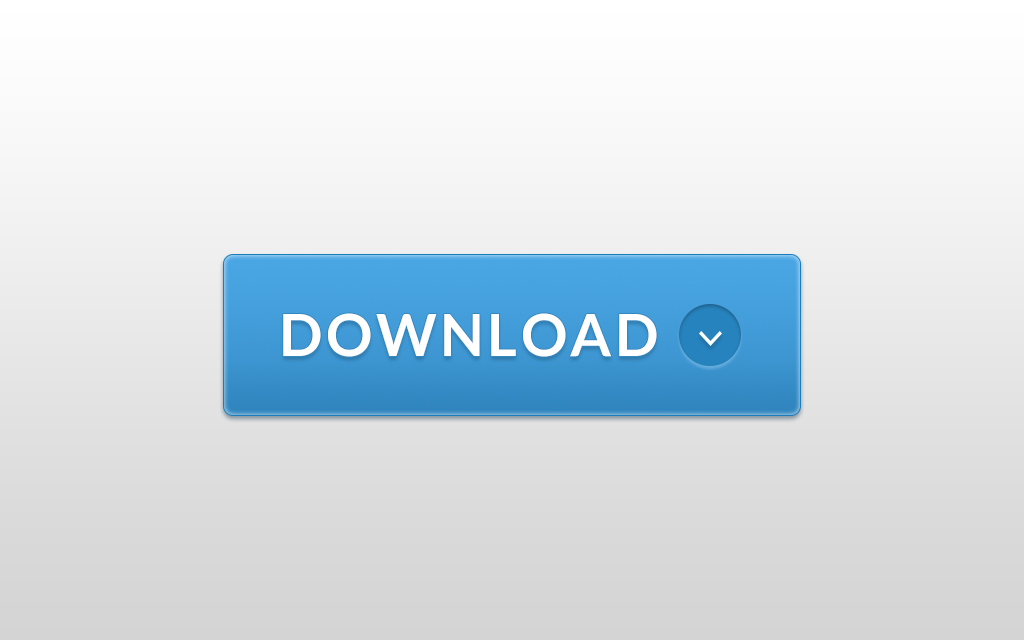
<style>
.page{position:relative;width:1024px;height:640px}
.page>*{position:absolute;margin:0}
.t1{font:58px "Lato-Bold";letter-spacing:0.06em;color:#ffffff}
</style>
<div class="page">
<p class="t1" style="left:283px;top:313px;width:374px;height:44px">DOWNLOAD</p>
</div>
